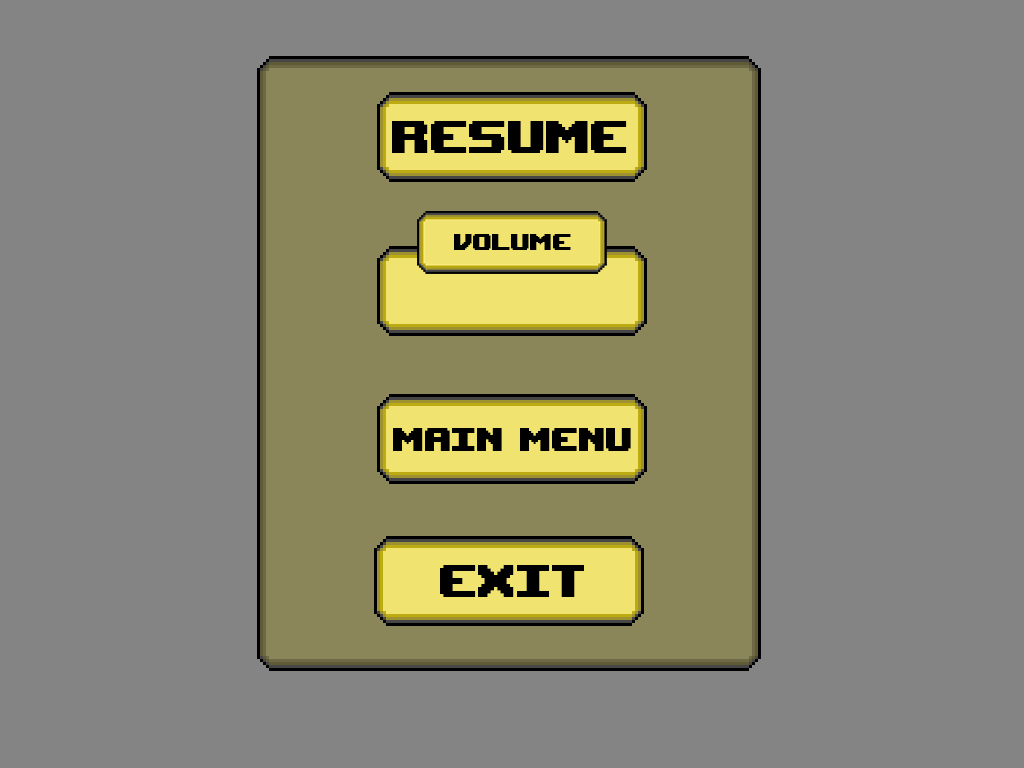
<style>
.page{position:relative;width:1024px;height:768px;background:#848484}
.page>*{position:absolute;margin:0}
.t1{font:64px "UpheavalTT-BRK-";color:#000000}
.t2{font:32px "UpheavalTT-BRK-";color:#000000}
.t3{font:45.3px "UpheavalTT-BRK-";color:#000000}
</style>
<div class="page">
<p class="t1" style="left:392px;top:121px;width:235px;height:32px">RESUME</p>
<p class="t2" style="left:454px;top:234px;width:117px;height:16px">VOLUME</p>
<p class="t3" style="left:393px;top:428px;width:238px;height:23px">MAIN MENU</p>
<p class="t1" style="left:440px;top:565px;width:144px;height:32px">exit</p>
</div>
